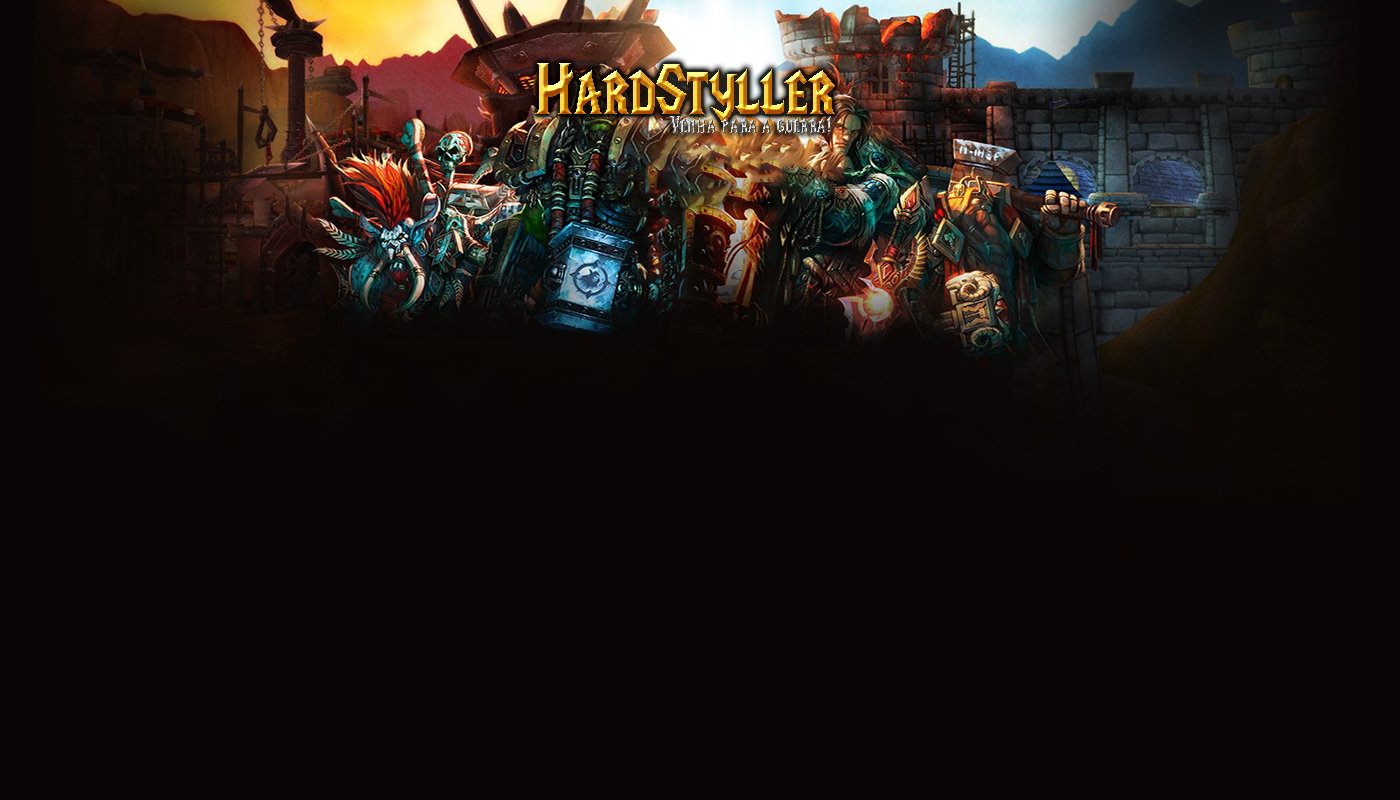
<style>
.page{position:relative;width:1400px;height:800px;background:#0a0605}
.page>*{position:absolute;margin:0}
.t1{font:73.3px "LifeCraft";scale:0.87 1}
.t2{font:24px "LifeCraft";scale:0.87 1}
</style>
<div class="page">
<p class="t1" style="left:535px;top:63px;width:300px;height:62px">HardStyller</p>
<p class="t2" style="left:670px;top:116px;width:161px;height:18px">Venha para a guerra!</p>
</div>
